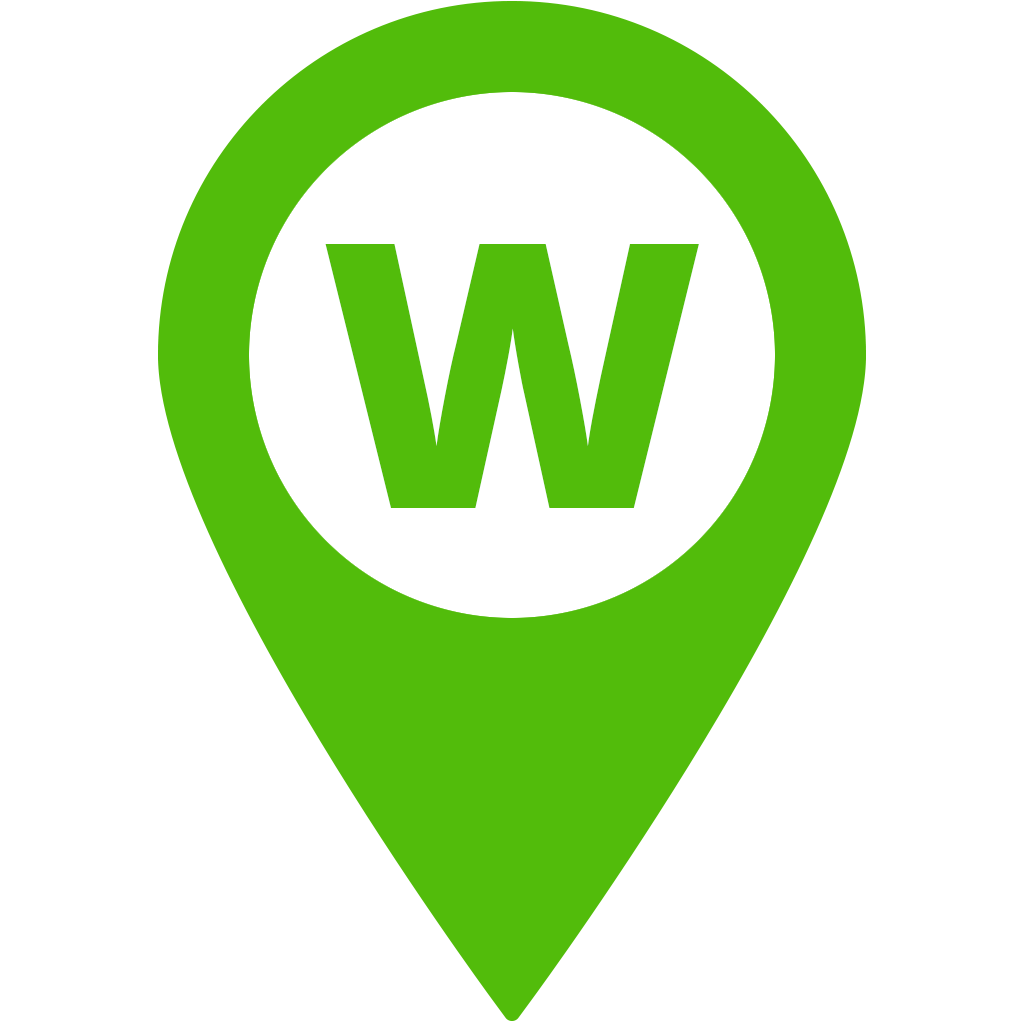
<style>
.page{position:relative;width:1024px;height:1024px;background:#ffffff}
.page>*{position:absolute;margin:0}
.t1{font:370px "OpenSans-Extrabold";color:#52bc0b}
</style>
<div class="page">
<p class="t1" style="left:325px;top:244px;width:374px;height:264px">W</p>
</div>
